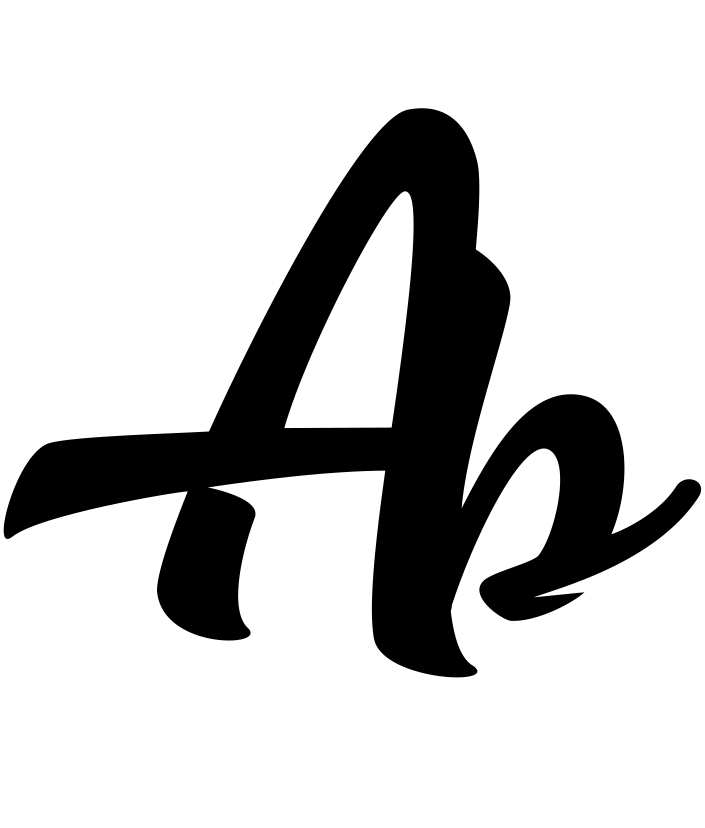
<style>
.page{position:relative;width:705px;height:828px;background:#ffffff}
.page>*{position:absolute;margin:0}
.t1{font:500px "BeStrong";letter-spacing:-0.05em;color:#000000}
</style>
<div class="page">
<p class="t1" style="left:3px;top:108px;width:477px;height:570px">A</p>
<p class="t1" style="left:396px;top:236px;width:306px;height:385px">b</p>
</div>
